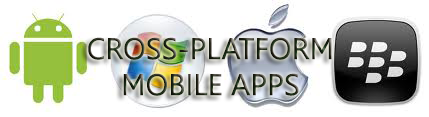
<style>
.page{position:relative;width:429px;height:117px;background:#ffffff}
.page>*{position:absolute;margin:0}
.t1{font:30px "Leelawadee"}
</style>
<div class="page">
<p class="t1" style="left:88px;top:37px;width:244px;height:59px;text-align:center">CROSS-PLATFORM<br>MOBILE APPS</p>
</div>
